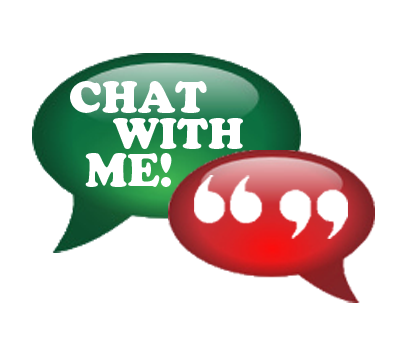
<style>
.page{position:relative;width:400px;height:351px;background:#ffffff}
.page>*{position:absolute;margin:0}
.t1{font:42.8px "CooperBlackStd";color:#ffffff}
.t2{font:41.9px "CooperBlackStd";color:#ffffff}
.t3{font:45.2px "CooperBlackStd";color:#ffffff}
</style>
<div class="page">
<p class="t1" style="left:70px;top:81px;width:137px;height:32px">CHAT</p>
<p class="t2" style="left:113px;top:118px;width:130px;height:31px">WITH</p>
<p class="t3" style="left:85px;top:153px;width:87px;height:34px">ME!</p>
</div>
